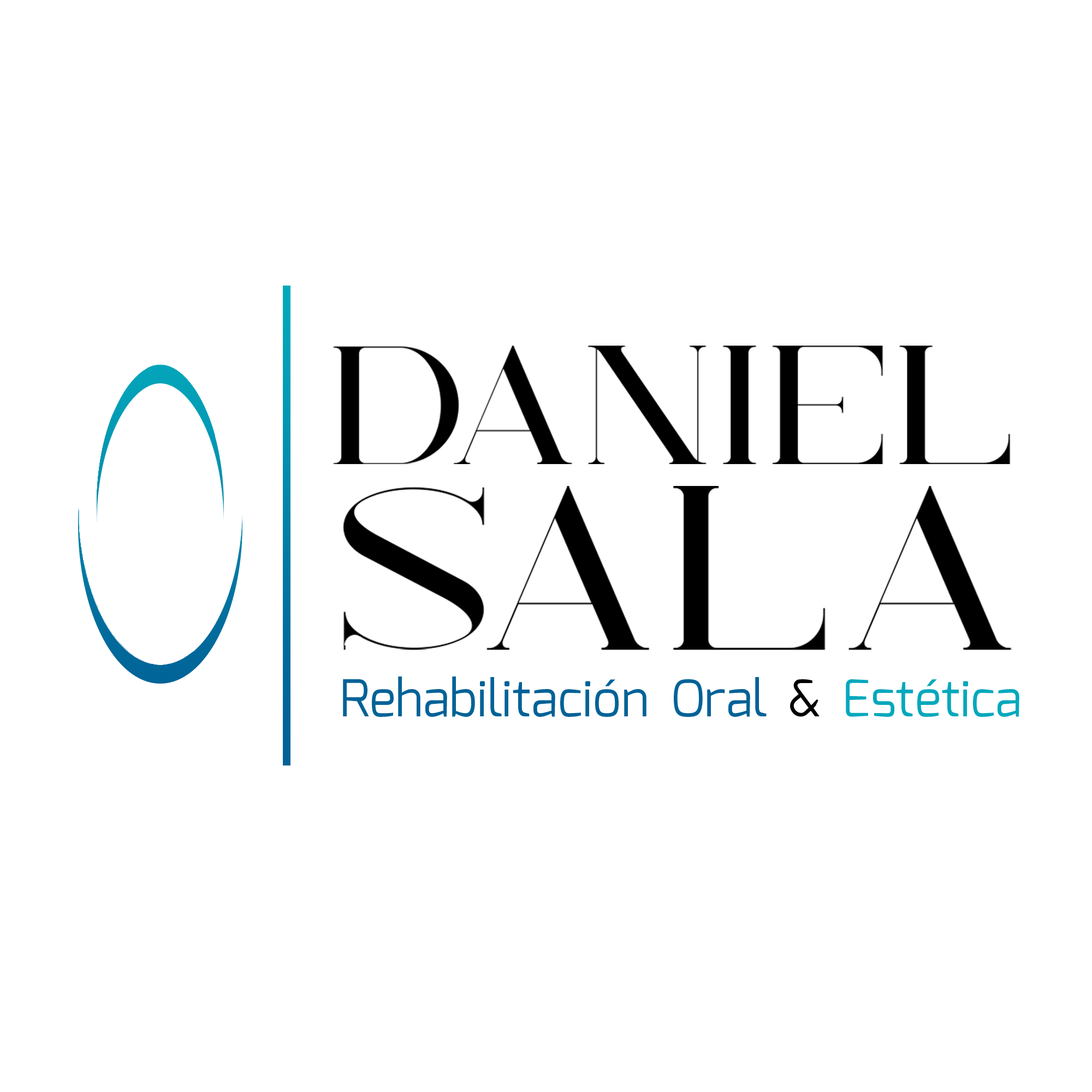
<style>
.page{position:relative;width:1092px;height:1092px;background:#ffffff}
.page>*{position:absolute;margin:0}
.t1{font:168.7px "UnrealRegular";color:#000000}
.t2{font:424px "UnrealRegular";color:#000000}
.t3{font:232px "UnrealRegular";letter-spacing:0.005em;color:#000000}
.t4{font:50.6px "Exo-Regular";color:#016297}
.t5{font:50.6px "Exo-Regular";color:#000000}
.t6{font:50.6px "Exo-Regular";color:#03a8bc}
</style>
<div class="page">
<p class="t1" style="left:333px;top:346px;width:677px;height:118px"><span class="t2"> </span>DANIEL</p>
<p class="t3" style="left:343px;top:486px;width:669px;height:164px">SALA</p>
<p class="t4" style="left:343px;top:676px;width:676px;height:41px">Rehabilitación Oral<span class="t5"> &amp; </span><span class="t6">Estética</span></p>
</div>
